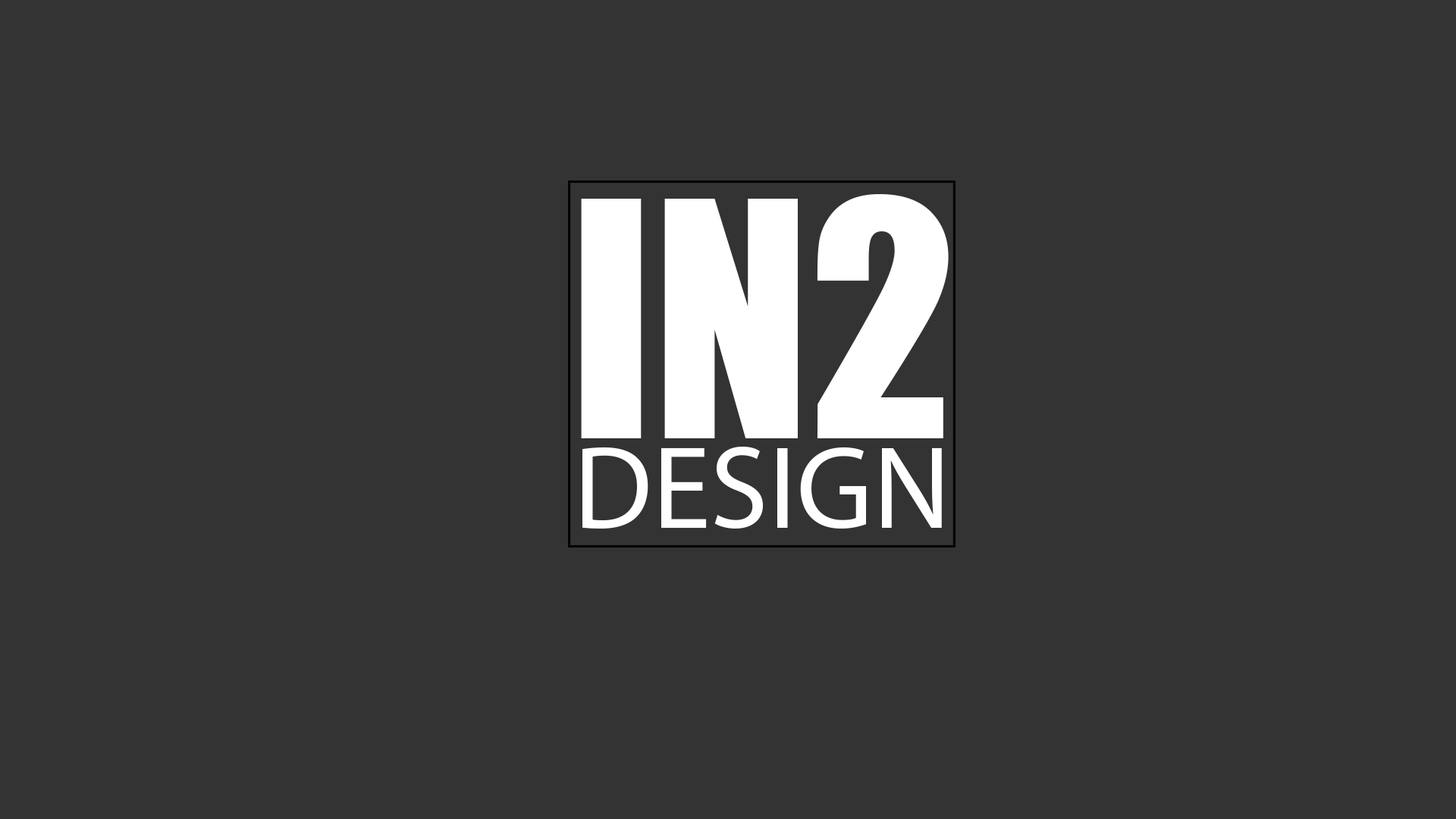
<style>
.page{position:relative;width:1456px;height:819px;background:#333333}
.page>*{position:absolute;margin:0}
.t1{font:303.3px "Impact";color:#ffffff;scale:0.96 1}
.t2{font:118.3px "MyriadPro-Regular";color:#ffffff}
.t3{font:117.5px "MyriadPro-Regular";color:#4b4b4b}
</style>
<div class="page">
<p class="t1" style="left:581px;top:194px;width:368px;height:244px">IN2</p>
<p class="t2" style="left:582px;top:447px;width:360px;height:82px"><span class="t3"> </span>DESIGN</p>
</div>
